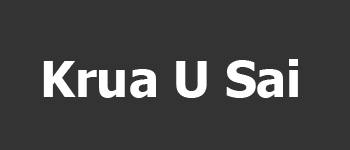
<style>
.page{position:relative;width:350px;height:150px;background:#333333}
.page>*{position:absolute;margin:0}
.t1{font:50px "Tahoma-Bold";color:#ffffff}
</style>
<div class="page">
<p class="t1" style="left:43px;top:59px;width:255px;height:39px">Krua U Sai</p>
</div>
